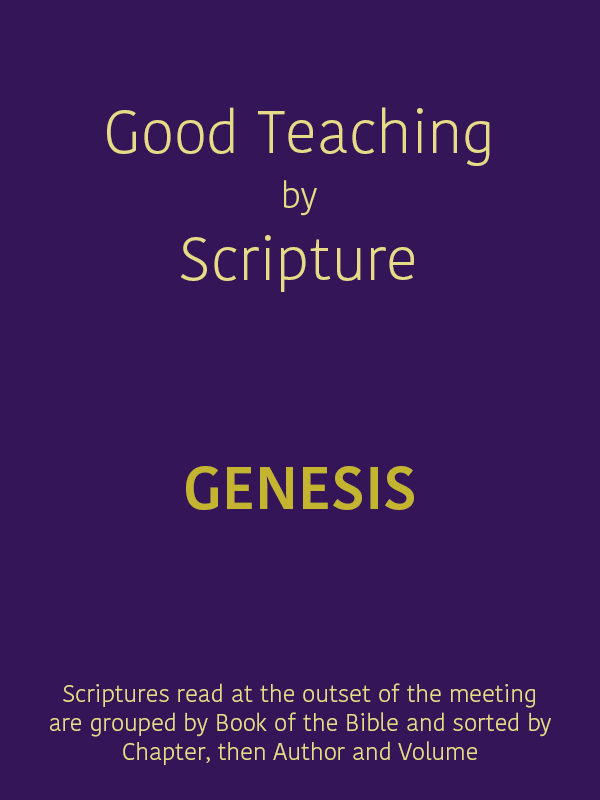
<style>
.page{position:relative;width:600px;height:800px;background:#341658}
.page>*{position:absolute;margin:0}
.t1{font:60px "KohinoorBangla-Light";color:#e8db87}
.t2{font:36px "KohinoorBangla-Light";color:#e8db87}
.t3{font:60px "KohinoorBangla-Semibold";color:#c4b430}
.t4{font:24px "KohinoorBangla-Light";color:#e8db87}
</style>
<div class="page">
<p class="t1" style="left:107px;top:107px;width:383px;height:185px;text-align:center">Good Teaching<br><span class="t2">by<br></span>Scripture</p>
<p class="t3" style="left:186px;top:466px;width:228px;height:44px">GENESIS</p>
<p class="t4" style="left:50px;top:683px;width:501px;height:82px;text-align:center">Scriptures read at the outset of the meeting<br>are grouped by Book of the Bible and sorted by<br>Chapter, then Author and Volume</p>
</div>
